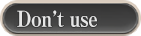
<style>
.page{position:relative;width:141px;height:36px}
.page>*{position:absolute;margin:0}
.t1{font:22px "RyuminPro-ExBold";letter-spacing:-0.04em;color:#e6e6e6;scale:0.9 1}
</style>
<div class="page">
<p class="t1" style="left:17px;top:10px;width:80px;height:17px">Don’t use</p>
</div>
